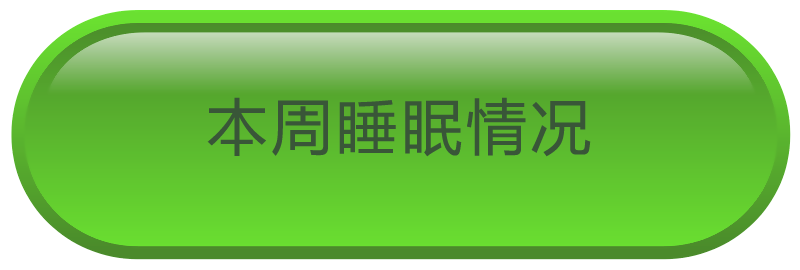
<style>
.page{position:relative;width:800px;height:270px}
.page>*{position:absolute;margin:0}
.t1{font:60px "MicrosoftYaHei";letter-spacing:0.08em;color:#395638}
</style>
<div class="page">
<p class="t1" style="left:207px;top:97px;width:384px;height:60px">本周睡眠情况</p>
</div>
